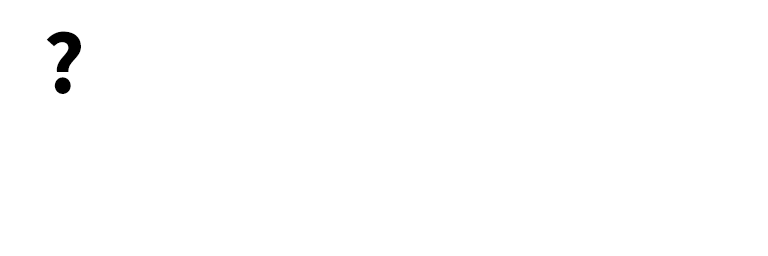
<style>
.page{position:relative;width:768px;height:256px;background:#ffffff}
.page>*{position:absolute;margin:0}
.t1{font:90px "SourceSansPro-Bold";color:#000000;font-variant:small-caps}
</style>
<div class="page">
<p class="t1" style="left:46px;top:31px;width:35px;height:63px">?</p>
</div>
